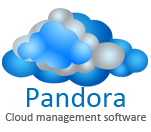
<style>
.page{position:relative;width:151px;height:132px;background:#ffffff}
.page>*{position:absolute;margin:0}
.t1{font:30px "Calibri";color:#0072bf}
.t2{font:12px "Calibri";color:#616161}
</style>
<div class="page">
<p class="t1" style="left:27px;top:87px;width:98px;height:20px">Pandora</p>
<p class="t2" style="left:5px;top:113px;width:141px;height:10px">Cloud management software</p>
</div>
